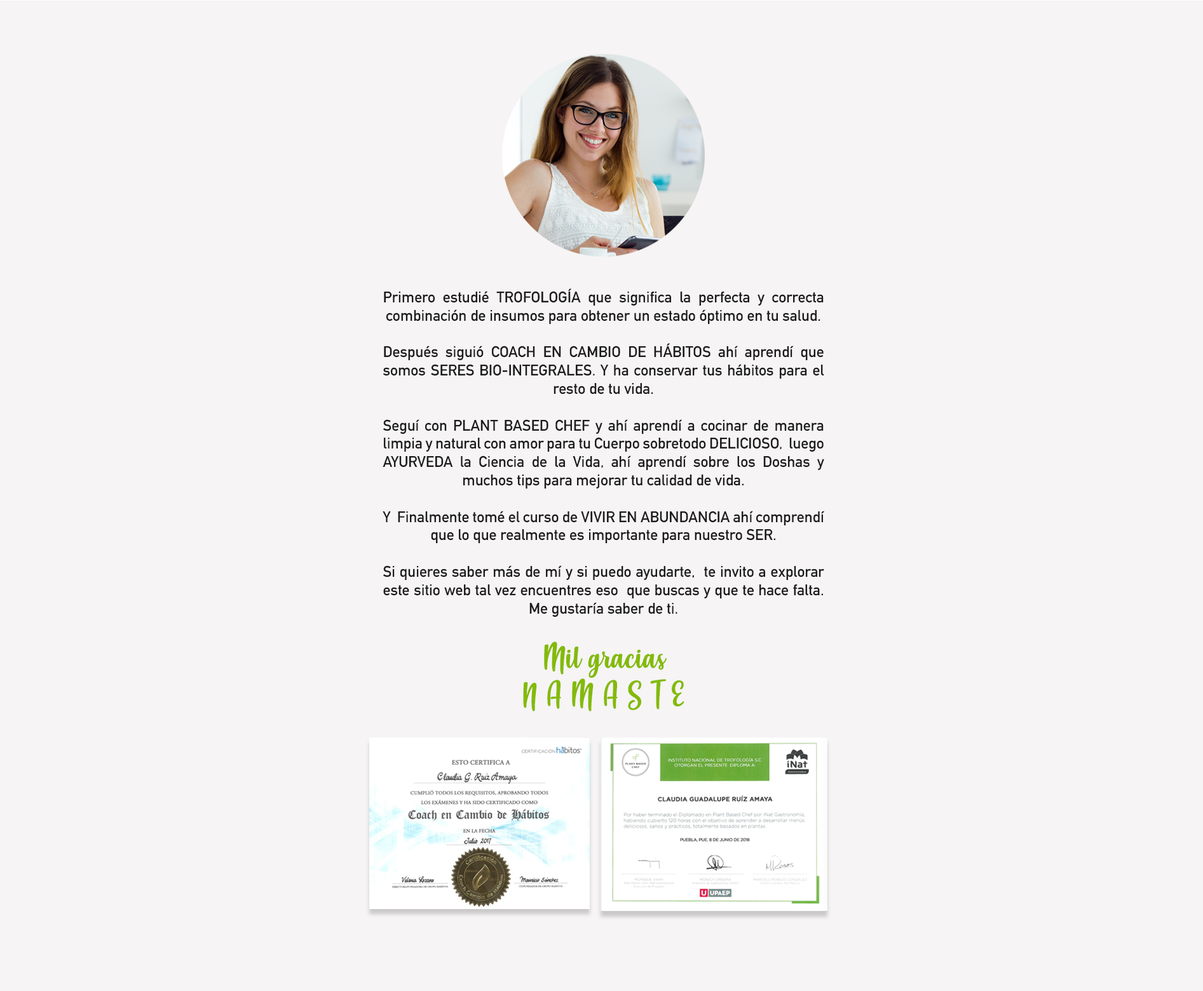
<style>
.page{position:relative;width:1203px;height:991px;background:#f6f4f4}
.page>*{position:absolute;margin:0}
.t1{font:15.3px "DINAlternate-Bold";color:#1c1c1c}
.t2{font:30.5px "Misses";color:#83ba07}
</style>
<div class="page">
<p class="t1" style="left:383px;top:288px;width:442px;height:424px;text-align:justify">Primero estudié TROFOLOGÍA que significa la perfecta y correcta combinación de insumos para obtener un estado óptimo en tu salud. <br> <br>Después siguió COACH EN CAMBIO DE HÁBITOS ahí aprendí que somos SERES BIO-INTEGRALES. Y ha conservar tus hábitos para el resto de tu vida. <br> <br>Seguí con PLANT BASED CHEF y ahí aprendí a cocinar de manera limpia y natural con amor para tu Cuerpo sobretodo DELICIOSO,  luego AYURVEDA la Ciencia de la Vida, ahí aprendí sobre los Doshas y muchos tips para mejorar tu calidad de vida. <br> <br>Y  Finalmente tomé el curso de VIVIR EN ABUNDANCIA ahí comprendí que lo que realmente es importante para nuestro SER.<br> <br>Si quieres saber más de mí y si puedo ayudarte,  te invito a explorar este sitio web tal vez encuentres eso  que buscas y que te hace falta. Me gustaría saber de ti.<br> <br><span class="t2">Mil gracias<br>N A M A S T E</span></p>
</div>
